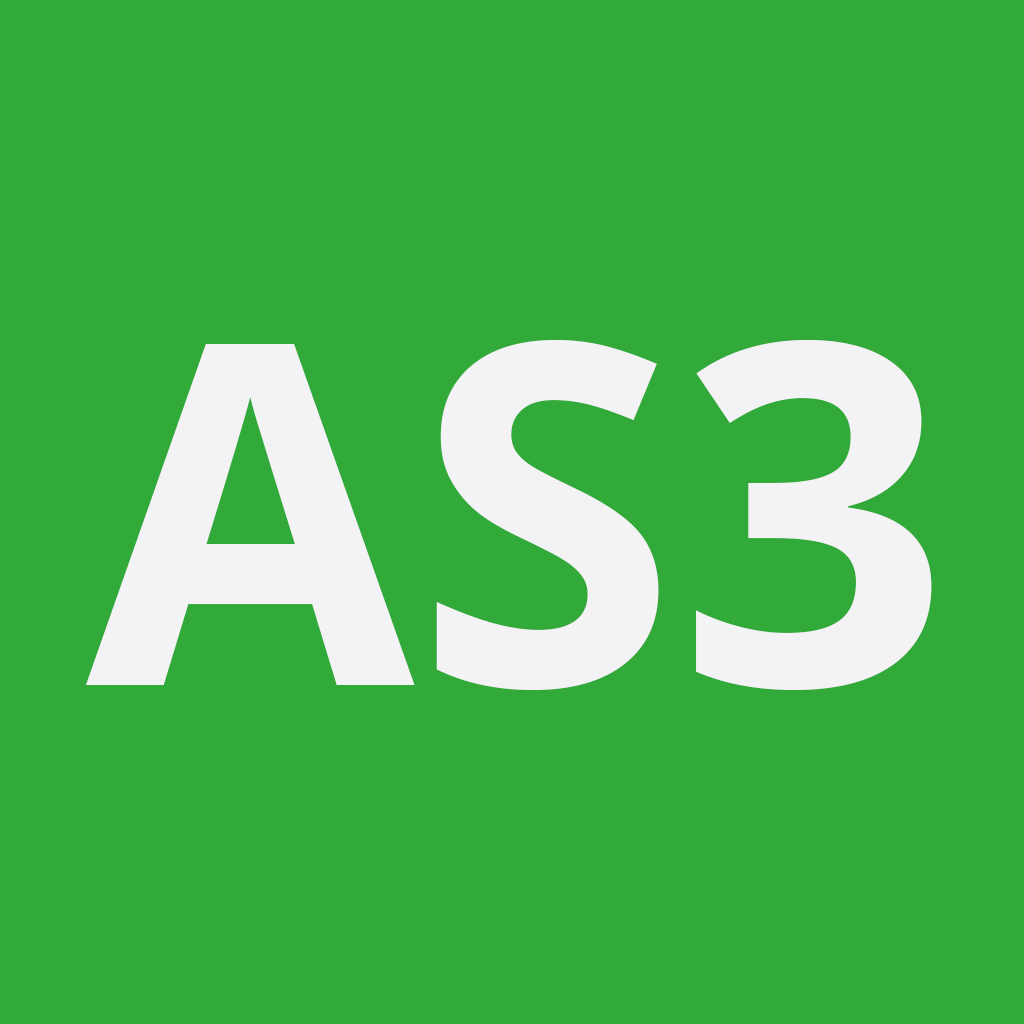
<style>
.page{position:relative;width:1024px;height:1024px;background:#31aa39}
.page>*{position:absolute;margin:0}
.t1{font:476.5px "OpenSans-Bold";color:#f3f3f5}
</style>
<div class="page">
<p class="t1" style="left:86px;top:340px;width:846px;height:350px">AS3</p>
</div>
